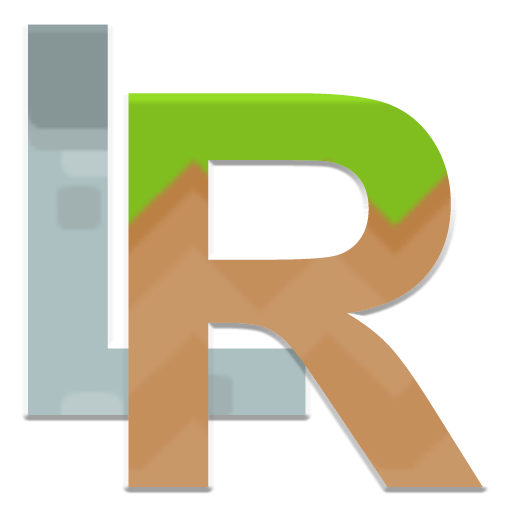
<style>
.page{position:relative;width:512px;height:512px;background:#ffffff}
.page>*{position:absolute;margin:0}
.t1{font:550px "Arial-BoldMT"}
</style>
<div class="page">
<p class="t1" style="left:28px;top:24px;width:278px;height:391px">L</p>
<p class="t1" style="left:128px;top:93px;width:355px;height:394px">R</p>
</div>
